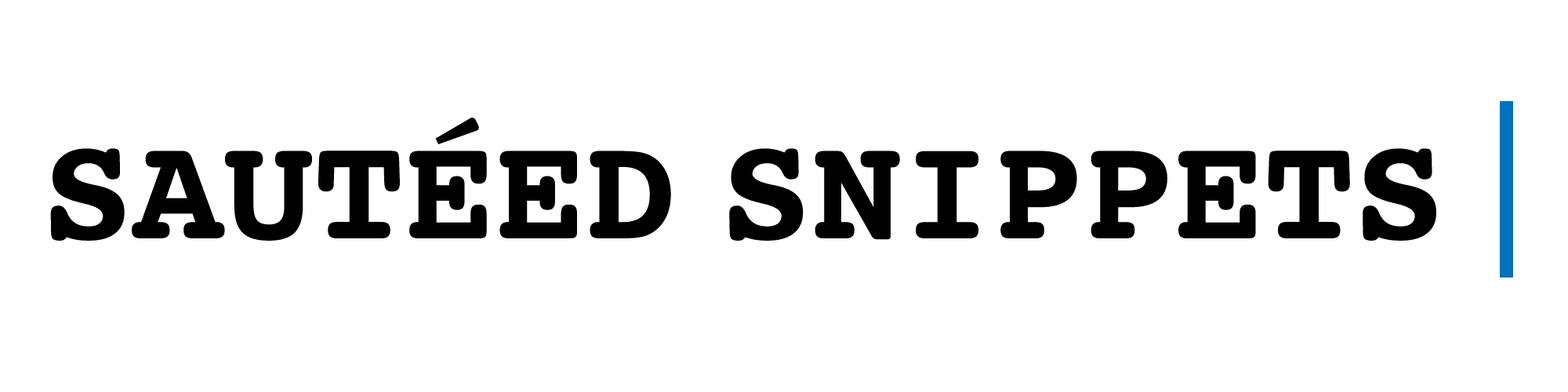
<style>
.page{position:relative;width:1568px;height:392px;background:#ffffff}
.page>*{position:absolute;margin:0}
.t1{font:150.6px "Courier-Bold";color:#000000}
</style>
<div class="page">
<p class="t1" style="left:50px;top:118px;width:1386px;height:123px">SAUTÉED SNIPPETS</p>
</div>
